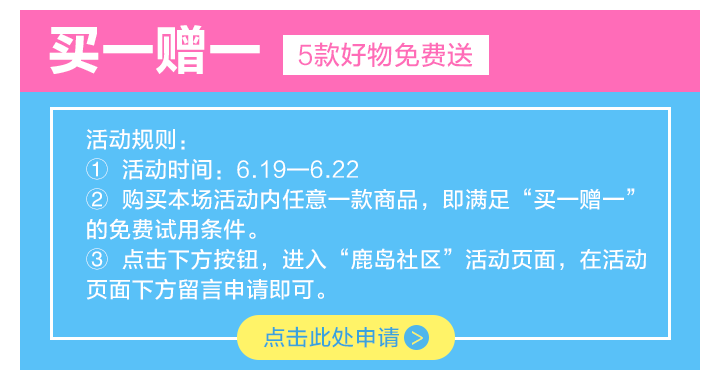
<style>
.page{position:relative;width:720px;height:380px;background:#59c1f8}
.page>*{position:absolute;margin:0}
.t1{font:52px "FZLTDHK--GBK1-0";letter-spacing:0.026em;color:#ffffff}
.t2{font:26px "FZLTZHUNHK--GBK1-0";letter-spacing:0.026em;color:#ff6cb8}
.t3{font:22px/30px "FZLTZHUNHK--GBK1-0";letter-spacing:0.04em;color:#ffffff}
.t4{font:22px "FZLTZHUNHK--GBK1-0";letter-spacing:0.04em;color:#3aa3db}
.t5{font:20px "FZLTZHUNHK--GBK1-0";letter-spacing:0.02em;color:#fff368}
</style>
<div class="page">
<p class="t1" style="left:49px;top:25px;width:211px;height:49px">买一赠一</p>
<p class="t2" style="left:298px;top:42px;width:175px;height:25px">5款好物免费送</p>
<p class="t3" style="left:86px;top:129px;width:560px;height:171px">活动规则：<br>① 活动时间：6.19—6.22<br>② 购买本场活动内任意一款商品，即满足“买一赠一”的免费试用条件。<br>③ 点击下方按钮，进入“鹿岛社区”活动页面，在活动页面下方留言申请即可。</p>
<p class="t4" style="left:263px;top:326px;width:136px;height:22px">点击此处申请</p>
<p class="t5" style="left:412px;top:331px;width:11px;height:14px">&gt;</p>
</div>
